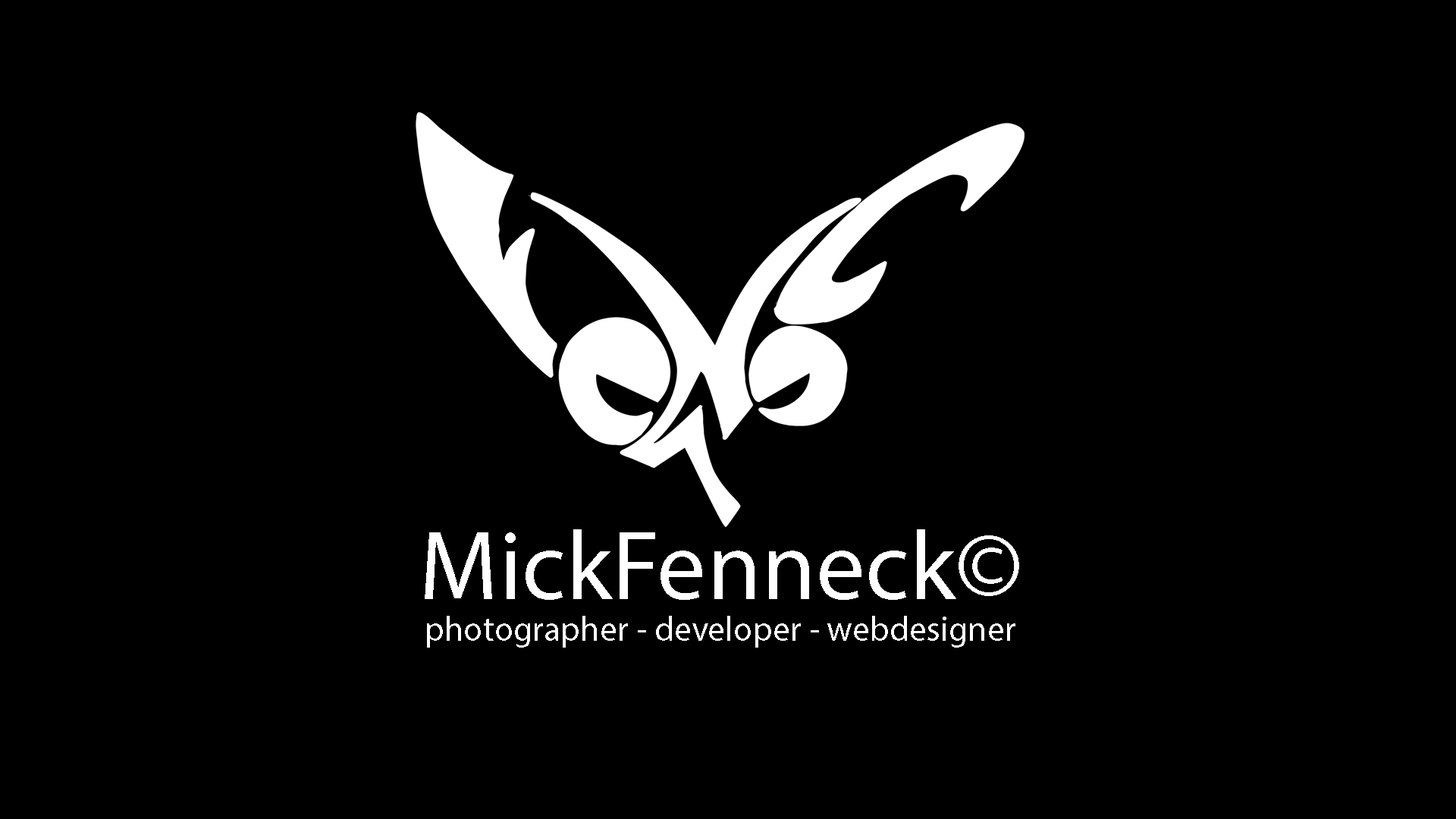
<style>
.page{position:relative;width:1456px;height:819px;background:#000000}
.page>*{position:absolute;margin:0}
.t1{font:34.9px "MyriadPro-Regular";color:#ffffff}
.t2{font:98.6px "MyriadPro-Regular";color:#ffffff}
</style>
<div class="page">
<p class="t1" style="left:425px;top:529px;width:594px;height:119px;text-align:center"><span class="t2">MickFenneck©<br></span>photographer - developer - webdesigner</p>
</div>
